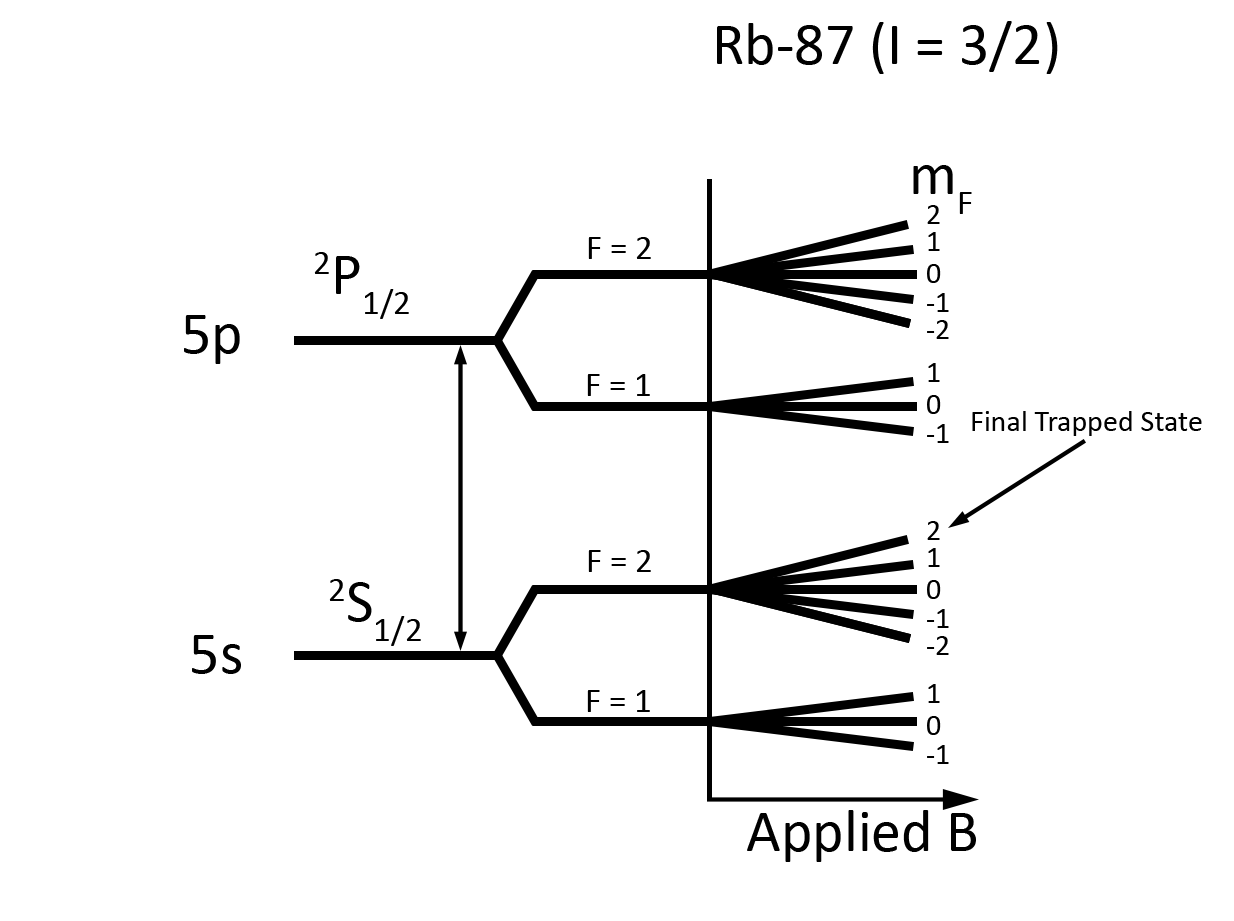
<style>
.page{position:relative;width:1234px;height:921px;background:#ffffff}
.page>*{position:absolute;margin:0}
.t1{font:60px "Calibri";color:#000000}
.t2{font:30px "Calibri";color:#000000}
</style>
<div class="page">
<p class="t1" style="left:717px;top:21px;width:341px;height:53px">Rb-87 (I = 3/2)</p>
<p class="t1" style="left:913px;top:165px;width:59px;height:49px">mF</p>
<p class="t2" style="left:927px;top:205px;width:13px;height:19px">2</p>
<p class="t2" style="left:928px;top:232px;width:12px;height:19px">1</p>
<p class="t1" style="left:588px;top:237px;width:63px;height:22px">F = 2</p>
<p class="t1" style="left:314px;top:252px;width:95px;height:67px">2P1/2</p>
<p class="t2" style="left:927px;top:264px;width:14px;height:19px">0</p>
<p class="t2" style="left:927px;top:293px;width:22px;height:19px">-1</p>
<p class="t1" style="left:184px;top:315px;width:56px;height:49px">5p</p>
<p class="t2" style="left:927px;top:320px;width:22px;height:19px">-2</p>
<p class="t2" style="left:928px;top:363px;width:12px;height:19px">1</p>
<p class="t1" style="left:587px;top:374px;width:63px;height:22px">F = 1</p>
<p class="t2" style="left:927px;top:395px;width:14px;height:19px">0</p>
<p class="t2" style="left:972px;top:411px;width:230px;height:25px">Final Trapped State</p>
<p class="t2" style="left:927px;top:424px;width:22px;height:19px">-1</p>
<p class="t2" style="left:927px;top:521px;width:13px;height:19px">2</p>
<p class="t1" style="left:588px;top:550px;width:63px;height:22px">F = 2</p>
<p class="t2" style="left:928px;top:548px;width:12px;height:19px">1</p>
<p class="t1" style="left:329px;top:579px;width:92px;height:67px">2S1/2</p>
<p class="t2" style="left:927px;top:580px;width:14px;height:19px">0</p>
<p class="t2" style="left:927px;top:609px;width:22px;height:19px">-1</p>
<p class="t1" style="left:192px;top:635px;width:49px;height:39px">5s</p>
<p class="t2" style="left:927px;top:636px;width:22px;height:19px">-2</p>
<p class="t2" style="left:928px;top:684px;width:12px;height:19px">1</p>
<p class="t1" style="left:587px;top:690px;width:63px;height:22px">F = 1</p>
<p class="t2" style="left:927px;top:716px;width:14px;height:19px">0</p>
<p class="t2" style="left:927px;top:745px;width:22px;height:19px">-1</p>
<p class="t1" style="left:747px;top:810px;width:229px;height:52px">Applied B</p>
</div>
